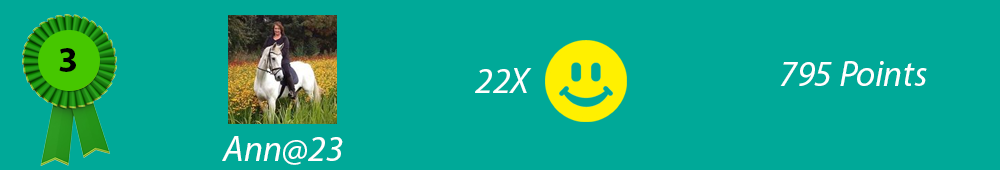
<style>
.page{position:relative;width:1000px;height:170px;background:#00a998}
.page>*{position:absolute;margin:0}
.t1{font:36px "MyriadPro-Bold";color:#000000}
.t2{font:36px "MyriadPro-It";color:#ffffff}
</style>
<div class="page">
<p class="t1" style="left:59px;top:48px;width:17px;height:24px">3</p>
<p class="t2" style="left:780px;top:61px;width:147px;height:25px">795 Points</p>
<p class="t2" style="left:475px;top:68px;width:57px;height:25px">22X</p>
<p class="t2" style="left:222px;top:136px;width:121px;height:29px">Ann@23</p>
</div>
